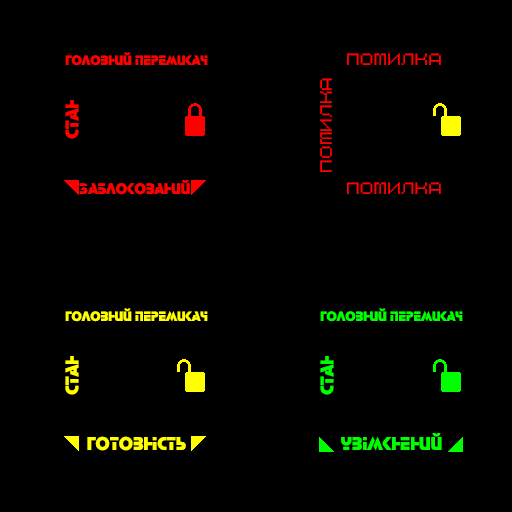
<style>
.page{position:relative;width:512px;height:512px;background:#000000}
.page>*{position:absolute;margin:0}
.t1{font:14px "Stop";color:#ff0000}
.t2{font:15.6px "Citadel-Regular";color:#ff0000}
.t3{font:19.2px "Stop";color:#ff0000}
.t4{font:15.7px "Stop";color:#ff0000}
.t5{font:14px "Stop";color:#ffff00}
.t6{font:14px "Stop";color:#00ff00}
.t7{font:19.2px "Stop";color:#ffff00}
.t8{font:19.2px "Stop";color:#00ff00}
</style>
<div class="page">
<p class="t1" style="left:65px;top:52px;width:143px;height:14px">головний перемикач</p>
<p class="t2" style="left:347px;top:53px;width:94px;height:12px">помилка</p>
<p class="t2" style="left:320px;top:78px;width:12px;height:94px;rotate:-90deg">помилка</p>
<p class="t3" style="left:65px;top:100px;width:14px;height:39px;rotate:-90deg">стан</p>
<p class="t4" style="left:79px;top:180px;width:111px;height:15px">заблокований</p>
<p class="t2" style="left:347px;top:182px;width:94px;height:12px">помилка</p>
<p class="t5" style="left:65px;top:308px;width:143px;height:14px">головний перемикач</p>
<p class="t6" style="left:320px;top:308px;width:143px;height:14px">головний перемикач</p>
<p class="t7" style="left:65px;top:356px;width:14px;height:39px;rotate:-90deg">стан</p>
<p class="t8" style="left:320px;top:356px;width:14px;height:39px;rotate:-90deg">стан</p>
<p class="t7" style="left:87px;top:436px;width:99px;height:15px">готовність</p>
<p class="t8" style="left:341px;top:433px;width:101px;height:18px">увімкнений</p>
</div>
